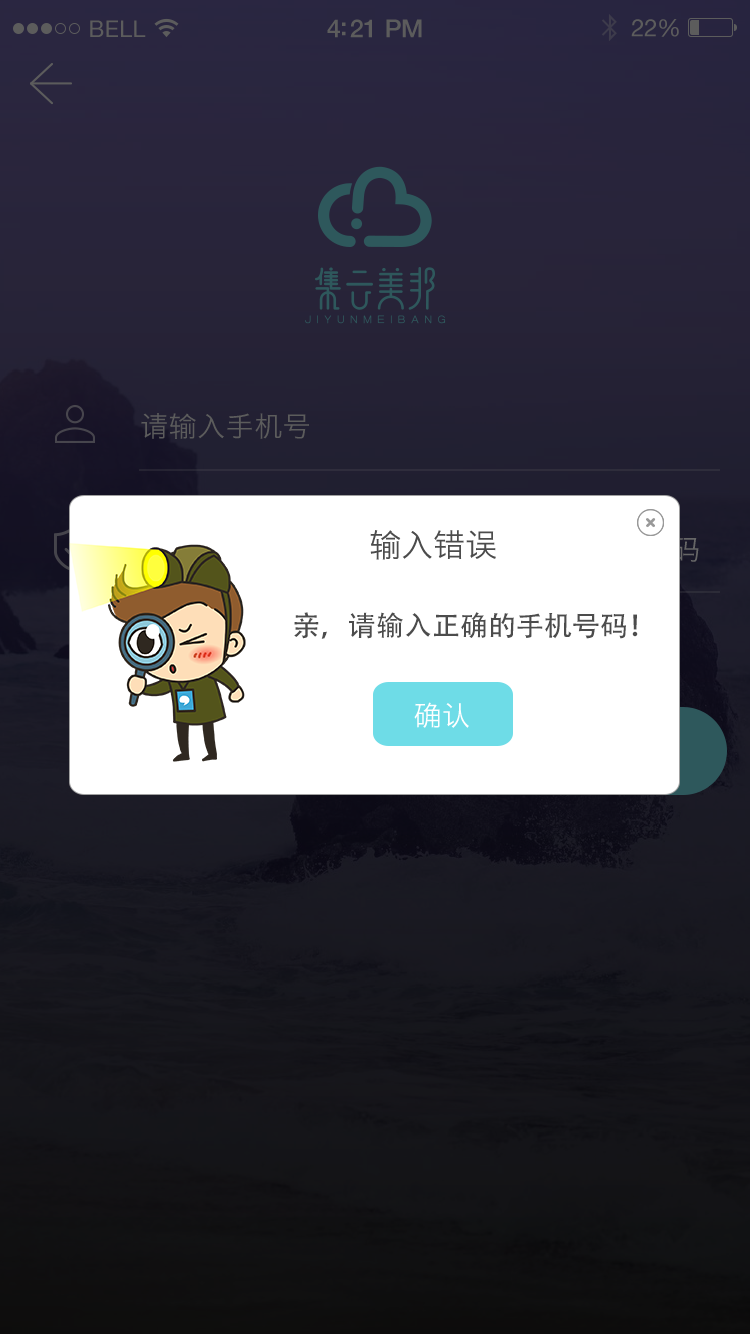
<style>
.page{position:relative;width:750px;height:1334px}
.page>*{position:absolute;margin:0}
.t1{font:28px "HiraginoSansGB-W3";letter-spacing:0.02em;color:#5c5c5c}
.t2{font:32px "HiraginoSansGB-W3";color:#4c4c4c}
.t3{font:28px "AdobeHeitiStd-Regular";color:#4c4c4c}
.t4{font:28px "HiraginoSansGB-W3";color:#ffffff}
</style>
<div class="page">
<p class="t1" style="left:141px;top:413px;width:168px;height:26px">请输入手机号</p>
<p class="t2" style="left:370px;top:530px;width:126px;height:30px">输入错误</p>
<p class="t3" style="left:294px;top:612px;width:344px;height:27px">亲，请输入正确的手机号码！</p>
<p class="t4" style="left:414px;top:702px;width:55px;height:26px">确认</p>
</div>
